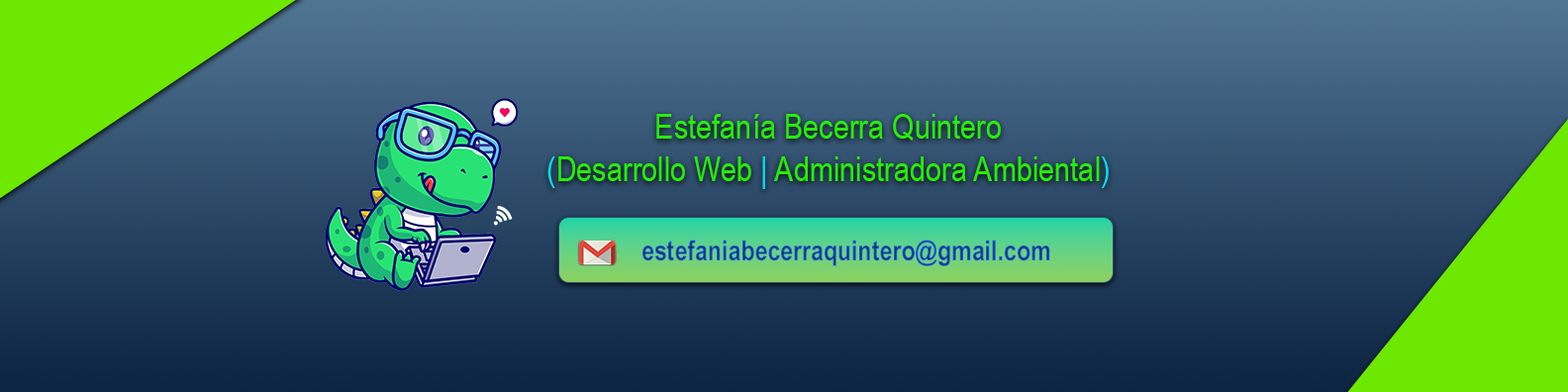
<style>
.page{position:relative;width:1568px;height:392px}
.page>*{position:absolute;margin:0}
.t1{font:34.9px "ArialNarrow";color:#26ee06}
.t2{font:34.9px "ArialNarrow";color:#06dbee}
</style>
<div class="page">
<p class="t1" style="left:547px;top:114px;width:562px;height:75px;text-align:center">Estefanía Becerra Quintero<br><span class="t2">(</span>Desarrollo Web <span class="t2">| </span>Administradora Ambiental<span class="t2">)</span></p>
</div>
